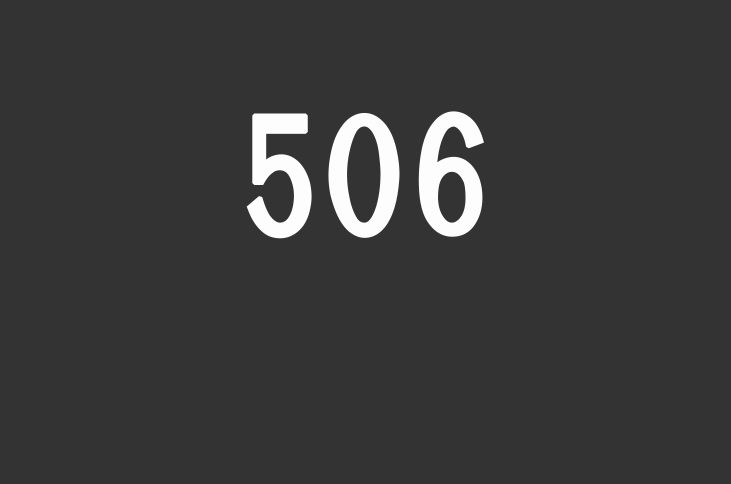
<style>
.page{position:relative;width:731px;height:484px;background:#333333}
.page>*{position:absolute;margin:0}
.t1{font:144px "HGSSoeiPresenceEB";color:#fdfdfd;font-weight:bold}
</style>
<div class="page">
<p class="t1" style="left:246px;top:111px;width:238px;height:128px">506</p>
</div>
